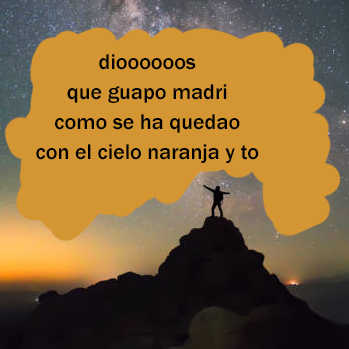
<style>
.page{position:relative;width:349px;height:349px;background:#d49533}
.page>*{position:absolute;margin:0}
.t1{font:22.1px "FranklinGothic-Medium";color:#000000}
</style>
<div class="page">
<p class="t1" style="left:36px;top:54px;width:223px;height:109px;text-align:center">dioooooos<br>que guapo madri<br>como se ha quedao<br>con el cielo naranja y to</p>
</div>
